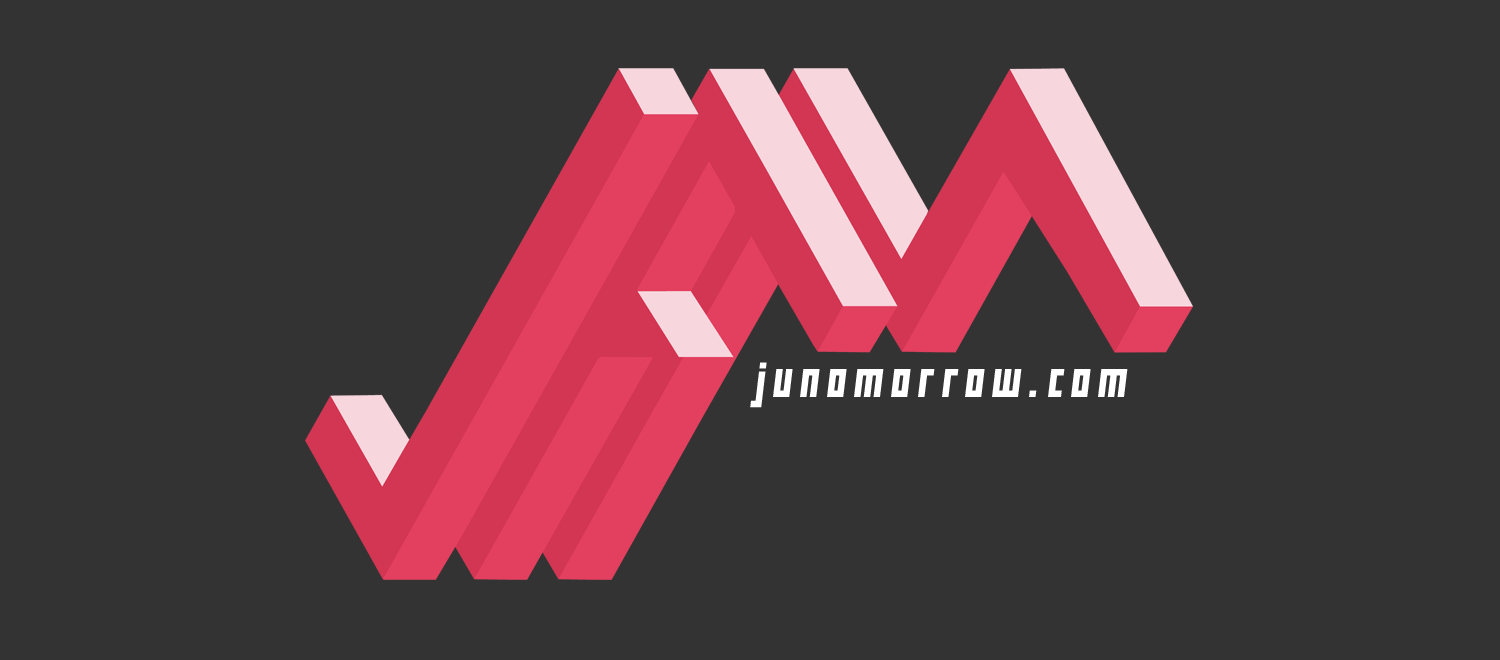
<style>
.page{position:relative;width:1500px;height:660px;background:#333333}
.page>*{position:absolute;margin:0}
.t1{font:41.4px "Buran-USSR";letter-spacing:0.18em;color:#ffffff}
</style>
<div class="page">
<p class="t1" style="left:750px;top:362px;width:378px;height:46px">junomorrow.com</p>
</div>
